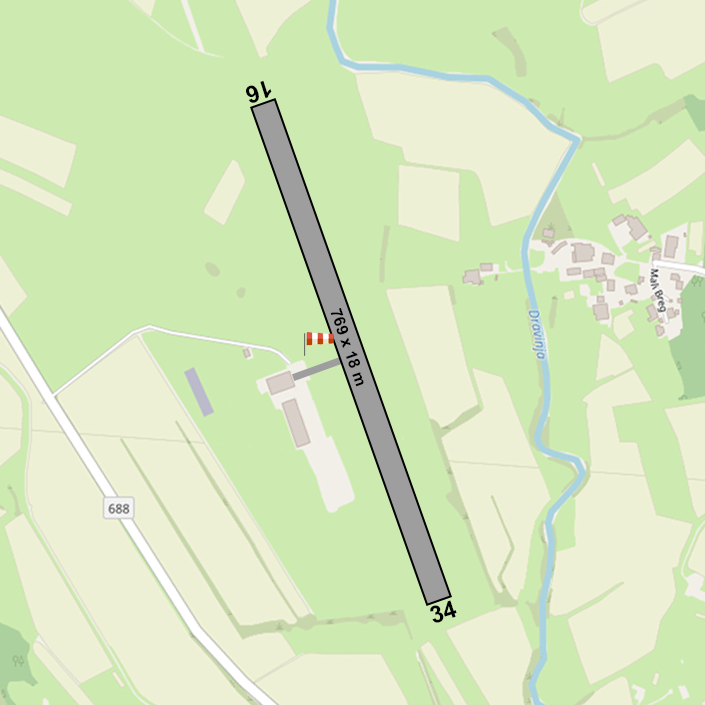
<style>
.page{position:relative;width:705px;height:705px;background:#cdebb0}
.page>*{position:absolute;margin:0}
.t1{font:24px "Arial-BoldMT";color:#000000}
.t2{font:16px "Arial-BoldMT";color:#000000}
</style>
<div class="page">
<p class="t1" style="left:246px;top:80px;width:26px;height:23px;rotate:162deg">16</p>
<p class="t2" style="left:330px;top:308px;width:34px;height:79px;rotate:71deg">769 x 18 m</p>
<p class="t1" style="left:430px;top:600px;width:27px;height:23px;rotate:-18deg">34</p>
</div>
